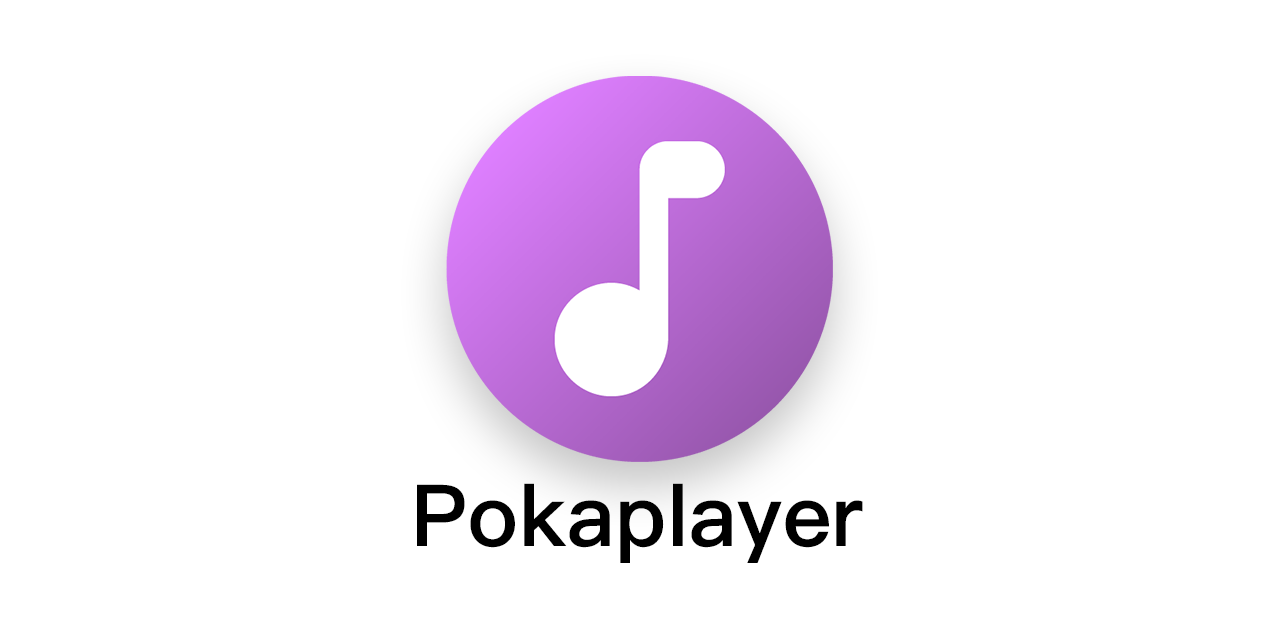
<style>
.page{position:relative;width:1280px;height:640px;background:#ffffff}
.page>*{position:absolute;margin:0}
.t1{font:85.7px "PingFangTC-Semibold";color:#000000}
</style>
<div class="page">
<p class="t1" style="left:417px;top:483px;width:446px;height:80px">Pokaplayer</p>
</div>
